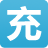
<style>
.page{position:relative;width:48px;height:48px;background:#ffffff}
.page>*{position:absolute;margin:0}
.t1{font:36px "MicrosoftYaHei-Bold";color:#ffffff;text-transform:uppercase}
</style>
<div class="page">
<p class="t1" style="left:6px;top:6px;width:36px;height:35px">充</p>
</div>
